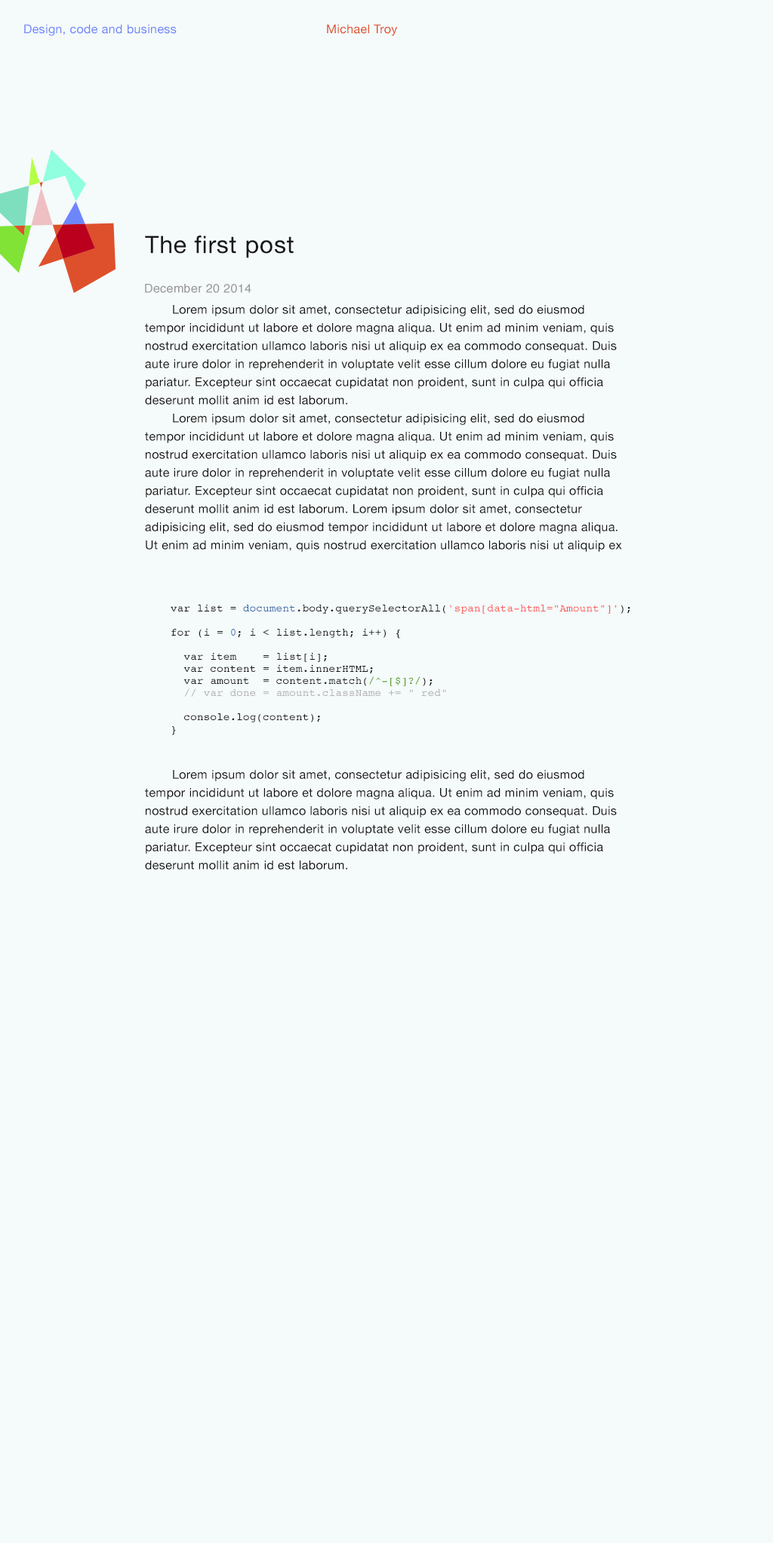
<style>
.page{position:relative;width:773px;height:1543px;background:#f5fafa}
.page>*{position:absolute;margin:0}
.t1{font:12.1px "HelveticaNeue";letter-spacing:0.024em;color:#6e86fb}
.t2{font:12.1px "HelveticaNeue";letter-spacing:0.024em;color:#de502b}
.t3{font:24.2px "HelveticaNeue";letter-spacing:0.024em;color:#181818}
.t4{font:12.1px "Helvetica";letter-spacing:0.024em;color:#969696}
.t5{font:12.1px/18.1px "HelveticaNeue";letter-spacing:0.024em;color:#101010}
.t6{font:10.6px/12.1px "Courier";letter-spacing:0.024em;color:#181818}
.t7{font:10.6px/12.1px "Courier";letter-spacing:0.024em;color:#3a6aaa}
.t8{font:10.6px/12.1px "Courier";letter-spacing:0.024em;color:#fd5b5b}
.t9{font:10.6px/12.1px "Courier";letter-spacing:0.024em;color:#52a122}
.t10{font:10.6px/12.1px "Courier";letter-spacing:0.024em;color:#b4b4b4}
</style>
<div class="page">
<p class="t1" style="left:24px;top:24px;width:153px;height:12px">Design, code and business</p>
<p class="t2" style="left:327px;top:24px;width:70px;height:12px">Michael Troy</p>
<p class="t3" style="left:145px;top:235px;width:149px;height:23px">The first post</p>
<p class="t4" style="left:145px;top:284px;width:106px;height:9px">December 20 2014</p>
<p class="t5" style="left:145px;top:305px;width:477px;height:247px">Lorem ipsum dolor sit amet, consectetur adipisicing elit, sed do eiusmod tempor incididunt ut labore et dolore magna aliqua. Ut enim ad minim veniam, quis nostrud exercitation ullamco laboris nisi ut aliquip ex ea commodo consequat. Duis aute irure dolor in reprehenderit in voluptate velit esse cillum dolore eu fugiat nulla pariatur. Excepteur sint occaecat cupidatat non proident, sunt in culpa qui officia deserunt mollit anim id est laborum.<br> Lorem ipsum dolor sit amet, consectetur adipisicing elit, sed do eiusmod tempor incididunt ut labore et dolore magna aliqua. Ut enim ad minim veniam, quis nostrud exercitation ullamco laboris nisi ut aliquip ex ea commodo consequat. Duis aute irure dolor in reprehenderit in voluptate velit esse cillum dolore eu fugiat nulla pariatur. Excepteur sint occaecat cupidatat non proident, sunt in culpa qui officia deserunt mollit anim id est laborum. Lorem ipsum dolor sit amet, consectetur adipisicing elit, sed do eiusmod tempor incididunt ut labore et dolore magna aliqua. Ut enim ad minim veniam, quis nostrud exercitation ullamco laboris nisi ut aliquip ex ea commodo consequat. Duis aute irure dolor in reprehenderit in voluptate velit esse cillum dolore eu fugiat nulla pariatur. Excepteur sint occaecat cupidatat non proident, sunt in culpa qui officia deserunt mollit anim id est laborum.</p>
<p class="t6" style="left:171px;top:604px;width:459px;height:131px">var list = <span class="t7">document</span>.body.querySelectorAll(<span class="t8">'span[data-html="Amount"]'</span>);<br> <br>for (i = <span class="t7">0</span>; i &lt; list.length; i++) {<br> <br>  var item    = list[i];<br>  var content = item.innerHTML;<br>  var amount  = content.match(<span class="t9">/^-[$]?/</span>);<br>  <span class="t10">// var done = amount.className += " red"<br></span> <br>  console.log(content);<br>}</p>
<p class="t5" style="left:145px;top:770px;width:472px;height:100px">Lorem ipsum dolor sit amet, consectetur adipisicing elit, sed do eiusmod tempor incididunt ut labore et dolore magna aliqua. Ut enim ad minim veniam, quis nostrud exercitation ullamco laboris nisi ut aliquip ex ea commodo consequat. Duis aute irure dolor in reprehenderit in voluptate velit esse cillum dolore eu fugiat nulla pariatur. Excepteur sint occaecat cupidatat non proident, sunt in culpa qui officia deserunt mollit anim id est laborum.</p>
</div>
